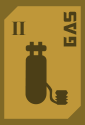
<style>
.page{position:relative;width:85px;height:125px;background:#bf9739}
.page>*{position:absolute;margin:0}
.t1{font:20px "TransformersMovie";letter-spacing:0.04em;color:#4c3f17}
.t2{font:20px "TimesNewRomanPS-BoldMT";letter-spacing:-0.04em;color:#4c3f17}
</style>
<div class="page">
<p class="t1" style="left:63px;top:11px;width:14px;height:36px;rotate:-90deg">Gas</p>
<p class="t2" style="left:11px;top:21px;width:15px;height:14px">II</p>
</div>
